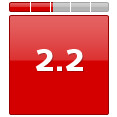
<style>
.page{position:relative;width:117px;height:117px;background:#d40000}
.page>*{position:absolute;margin:0}
.t1{font:36px "Colaborate-Bold";color:#ffffff;text-transform:uppercase}
</style>
<div class="page">
<p class="t1" style="left:35px;top:49px;width:48px;height:22px">2.2</p>
</div>
